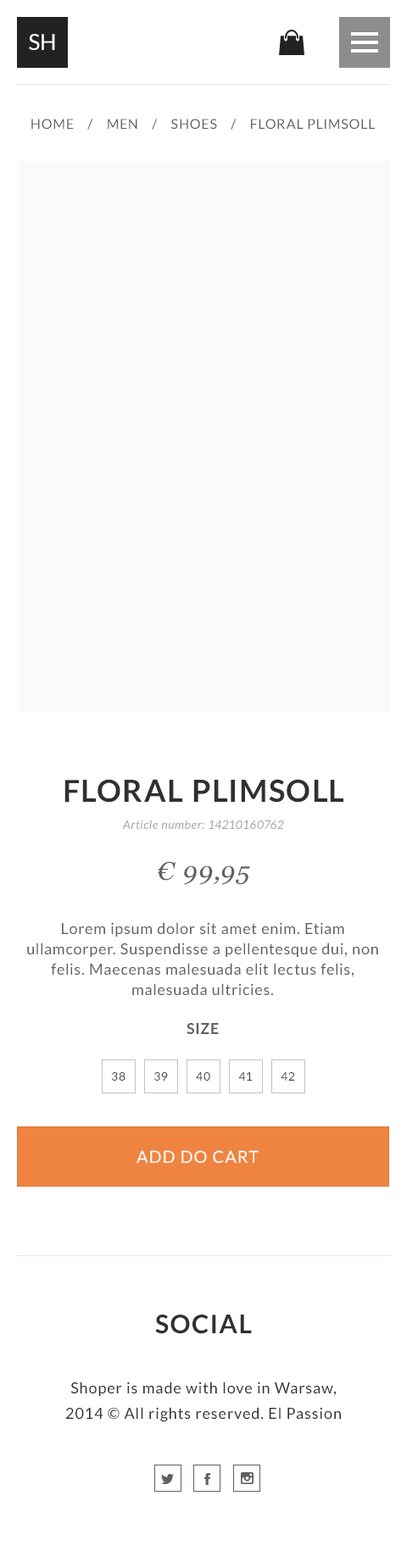
<style>
.page{position:relative;width:407px;height:1568px;background:#ffffff}
.page>*{position:absolute;margin:0}
.t1{font:21.9px "Lato-Regular";color:#ffffff;text-transform:uppercase}
.t2{font:13.6px "Lato-Regular";letter-spacing:0.05em;color:#606060;text-transform:uppercase}
.t3{font:11.9px/27.1px "Lato-Italic";letter-spacing:0.05em;color:#a3a3a3}
.t4{font:30.5px/30.5px "Lato-Bold";letter-spacing:0.05em;color:#303030;text-transform:uppercase}
.t5{font:25.4px/30.5px "Georgia-Italic";letter-spacing:0.05em;color:#606060;text-transform:uppercase}
.t6{font:15.3px/20.3px "Lato-Regular";letter-spacing:0.05em;color:#606060}
.t7{font:15.3px "Lato-Bold";letter-spacing:0.05em;color:#606060;text-transform:uppercase}
.t8{font:12px "Lato-Regular";letter-spacing:0.05em;color:#464542;text-transform:uppercase}
.t9{font:17px "Lato-Regular";letter-spacing:0.05em;color:#ffffff;text-transform:uppercase}
.t10{font:25.4px "Lato-Bold";letter-spacing:0.05em;color:#303030;text-transform:uppercase}
.t11{font:15.3px/25.4px "Lato-Regular";letter-spacing:0.05em;color:#303030}
</style>
<div class="page">
<p class="t1" style="left:29px;top:34px;width:26px;height:16px">SH</p>
<p class="t2" style="left:31px;top:119px;width:344px;height:11px">HOME    /    men    /    shoes    /    FLORAL PLIMSOLL</p>
<p class="t3" style="left:64px;top:779px;width:279px;height:106px;text-align:center"><span class="t4">FLORAL PLIMSOLL<br></span>Article number: 14210160762<br><br><span class="t5">€ 99,95</span></p>
<p class="t6" style="left:27px;top:922px;width:351px;height:74px;text-align:center">Lorem ipsum dolor sit amet enim. Etiam ullamcorper. Suspendisse a pellentesque dui, non felis. Maecenas malesuada elit lectus felis, malesuada ultricies.</p>
<p class="t7" style="left:186px;top:1023px;width:33px;height:11px">Size</p>
<p class="t8" style="left:111px;top:1072px;width:14px;height:9px">38</p>
<p class="t8" style="left:154px;top:1072px;width:14px;height:9px">39</p>
<p class="t8" style="left:196px;top:1072px;width:14px;height:9px">40</p>
<p class="t8" style="left:238px;top:1072px;width:14px;height:9px">41</p>
<p class="t8" style="left:281px;top:1072px;width:14px;height:9px">42</p>
<p class="t9" style="left:136px;top:1150px;width:123px;height:13px">Add do cart</p>
<p class="t10" style="left:155px;top:1315px;width:97px;height:19px">social</p>
<p class="t11" style="left:66px;top:1382px;width:275px;height:40px;text-align:center">Shoper is made with love in Warsaw,<br>2014 © All rights reserved. El Passion</p>
</div>
